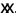
<style>
.page{position:relative;width:16px;height:16px;background:#ffffff}
.page>*{position:absolute;margin:0}
.t1{font:18px "Helvetica";color:#000000}
.t2{font:18px "Helvetica";letter-spacing:-0.025em;color:#000000}
</style>
<div class="page">
<p class="t1" style="left:0px;top:3px;width:9px;height:10px">x</p>
<p class="t2" style="left:5px;top:3px;width:13px;height:10px">x.</p>
</div>
